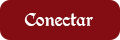
<style>
.page{position:relative;width:120px;height:40px;background:#830d12}
.page>*{position:absolute;margin:0}
.t1{font:13px "BerryRotunda-Regular";color:#ffffff}
</style>
<div class="page">
<p class="t1" style="left:24px;top:13px;width:69px;height:13px">Conectar</p>
</div>
